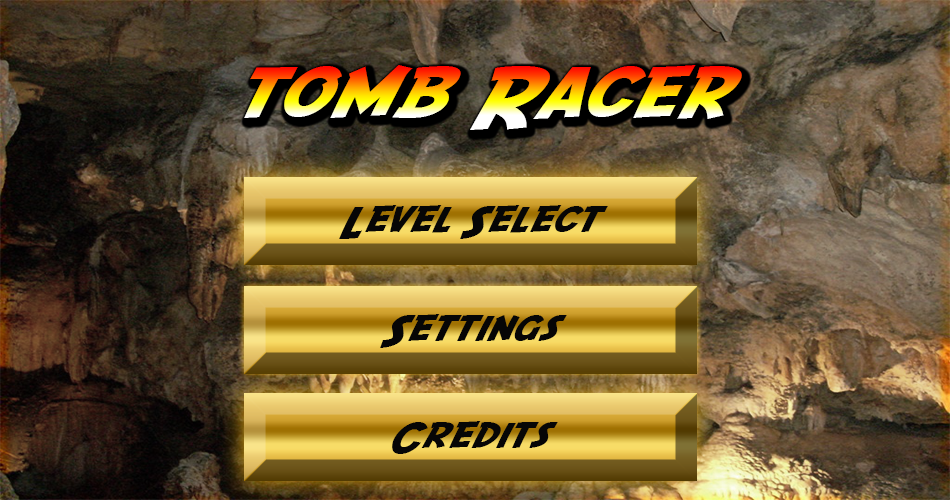
<style>
.page{position:relative;width:950px;height:500px}
.page>*{position:absolute;margin:0}
.t1{font:72px "SFFedora";letter-spacing:-0.005em;scale:1.2 1}
.t2{font:36px "SFFedora";letter-spacing:-0.005em;color:#060606;scale:1.2 1}
</style>
<div class="page">
<p class="t1" style="left:244px;top:65px;width:498px;height:65px">tomb Racer</p>
<p class="t2" style="left:339px;top:205px;width:269px;height:34px">Level Select</p>
<p class="t2" style="left:380px;top:314px;width:187px;height:34px">Settings</p>
<p class="t2" style="left:392px;top:421px;width:166px;height:33px">Credits</p>
</div>
